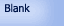
<style>
.page{position:relative;width:64px;height:26px}
.page>*{position:absolute;margin:0}
.t1{font:10.5px "Tahoma";color:#00164a}
</style>
<div class="page">
<p class="t1" style="left:5px;top:3px;width:25px;height:10px">Blank</p>
</div>
